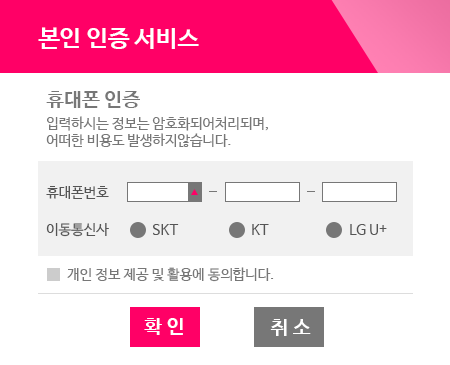
<style>
.page{position:relative;width:450px;height:365px;background:#ffffff}
.page>*{position:absolute;margin:0}
.t1{font:20px "NanumBarunGothicBold";color:#777777}
.t2{font:14px "NanumBarunGothic";color:#777777}
.t3{font:14px "NanumBarunGothic";color:#555555}
.t4{font:20px "NanumBarunGothicBold";color:#ffffff}
</style>
<div class="page">
<p class="t1" style="left:46px;top:91px;width:94px;height:17px">휴대폰 인증</p>
<p class="t2" style="left:46px;top:116px;width:222px;height:31px">입력하시는 정보는 암호화되어처리되며, <br>어떠한 비용도 발생하지않습니다.</p>
<p class="t3" style="left:46px;top:186px;width:63px;height:13px">휴대폰번호</p>
<p class="t3" style="left:46px;top:223px;width:63px;height:14px">이동통신사</p>
<p class="t3" style="left:153px;top:224px;width:26px;height:11px">SKT</p>
<p class="t3" style="left:252px;top:224px;width:17px;height:11px">KT</p>
<p class="t3" style="left:350px;top:224px;width:37px;height:11px">LG U+</p>
<p class="t2" style="left:67px;top:267px;width:207px;height:15px">개인 정보 제공 및 활용에 동의합니다.</p>
<p class="t4" style="left:144px;top:318px;width:39px;height:17px">확 인</p>
<p class="t4" style="left:270px;top:319px;width:41px;height:17px">취 소</p>
</div>
